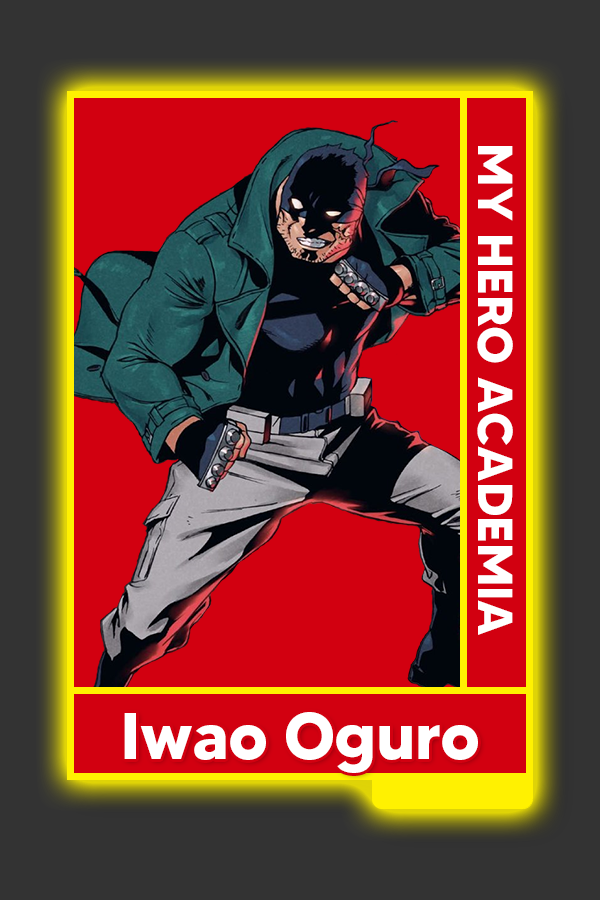
<style>
.page{position:relative;width:600px;height:900px;background:#d20010}
.page>*{position:absolute;margin:0}
.t1{font:48.8px "MADETOMMY-Bold";color:#ffffff}
.t2{font:65.2px "MADETOMMY-Bold";color:#ffffff}
</style>
<div class="page">
<p class="t1" style="left:477px;top:146px;width:36px;height:489px;rotate:90deg">MY HERO ACADEMIA</p>
<p class="t2" style="left:124px;top:712px;width:354px;height:61px">Iwao Oguro</p>
</div>
